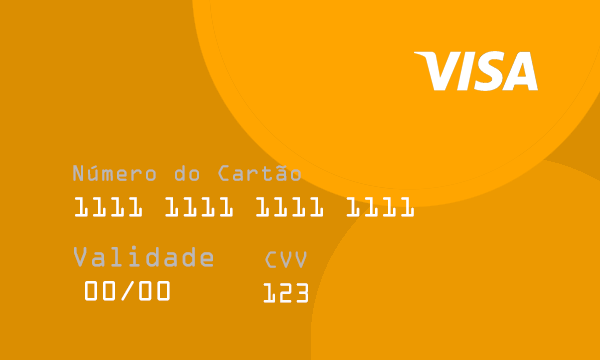
<style>
.page{position:relative;width:600px;height:360px;background:#db8e01}
.page>*{position:absolute;margin:0}
.t1{font:23.9px "OCRAExtended";color:#b8b8b8}
.t2{font:29.9px "OCRAExtended";color:#ffffff}
.t3{font:30px "OCRAExtended";color:#b8b8b8}
.t4{font:25.1px "OCRAExtended";color:#bab6b0}
.t5{font:30px "OCRAExtended";color:#ffffff}
.t6{font:29.8px "OCRAExtended";color:#fbfaf8;scale:0.92 1}
</style>
<div class="page">
<p class="t1" style="left:73px;top:165px;width:228px;height:16px">Número do Cartão</p>
<p class="t2" style="left:75px;top:197px;width:339px;height:20px">1111 1111 1111 1111</p>
<p class="t3" style="left:74px;top:245px;width:139px;height:22px">Validade</p>
<p class="t4" style="left:265px;top:251px;width:42px;height:17px">CVV</p>
<p class="t5" style="left:85px;top:281px;width:85px;height:20px">00/00</p>
<p class="t6" style="left:263px;top:283px;width:45px;height:20px">123</p>
</div>
